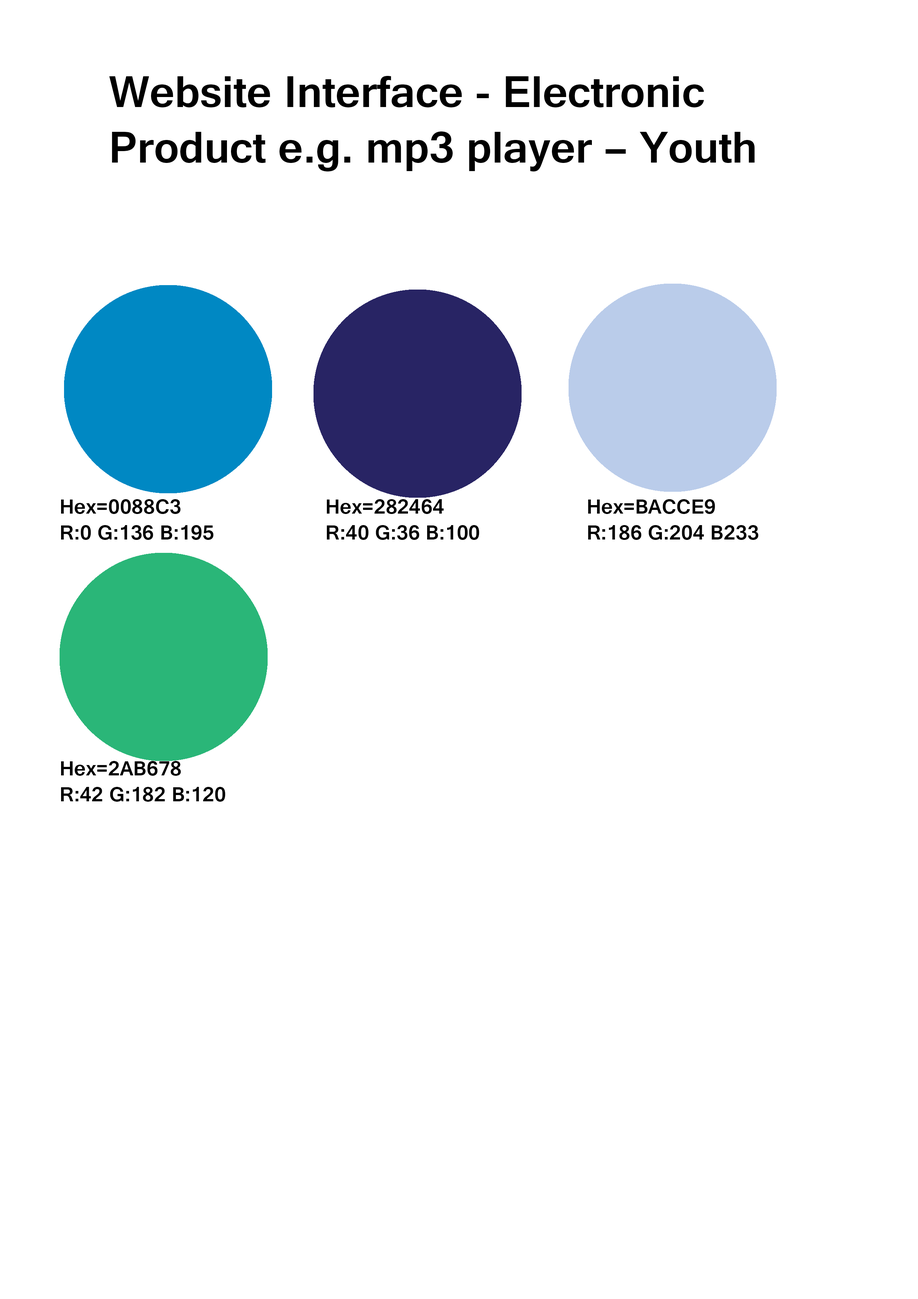
<style>
.page{position:relative;width:918px;height:1299px;background:#ffffff}
.page>*{position:absolute;margin:0}
.t1{font:46.3px "Gautami-Bold";color:#000000}
.t2{font:21.6px "Gautami-Bold";color:#000000}
</style>
<div class="page">
<p class="t1" style="left:109px;top:76px;width:646px;height:95px">Website Interface - Electronic Product e.g. mp3 player – Youth Market</p>
<p class="t2" style="left:61px;top:499px;width:153px;height:41px">Hex=0088C3<br>R:0 G:136 B:195</p>
<p class="t2" style="left:327px;top:499px;width:152px;height:41px">Hex=282464 <br>R:40 G:36 B:100</p>
<p class="t2" style="left:588px;top:499px;width:171px;height:41px">Hex=BACCE9<br>R:186 G:204 B233</p>
<p class="t2" style="left:61px;top:761px;width:164px;height:41px">Hex=2AB678<br>R:42 G:182 B:120</p>
</div>
